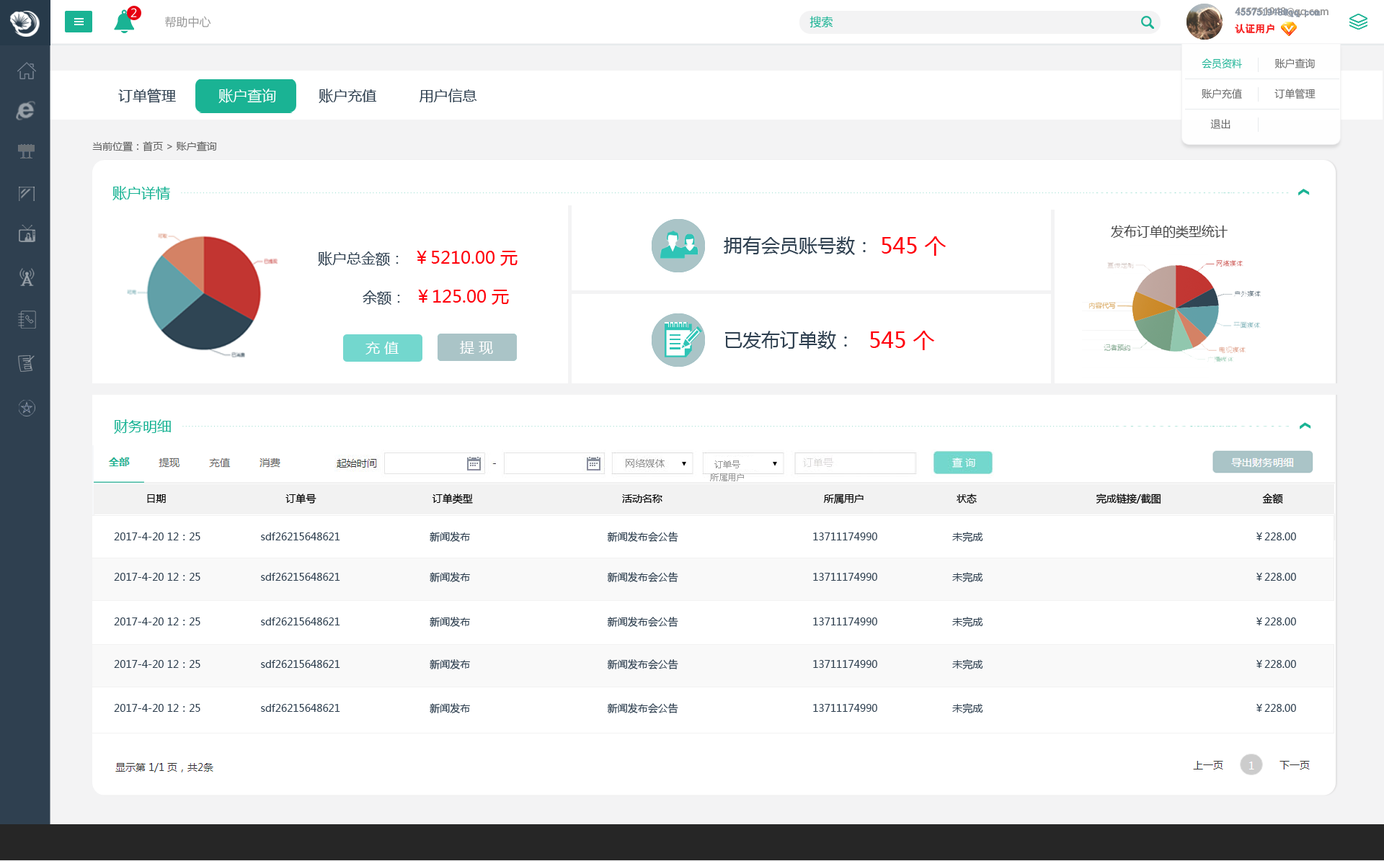
<style>
.page{position:relative;width:1384px;height:861px;background:#ffffff}
.page>*{position:absolute;margin:0}
.t1{font:11.5px "MicrosoftYaHei";color:#ffffff}
.t2{font:11.5px "MicrosoftYaHei";color:#999999}
.t3{font:11.5px "MicrosoftYaHei";color:#1ab394}
.t4{font:10.1px/17.3px "AdobeHeitiStd-Regular";color:#999999}
.t5{font:10.1px/17.3px "AdobeHeitiStd-Regular";color:#f61e1e}
.t6{font:10.1px/17.3px "AdobeHeitiStd-Regular";color:#ffffff}
.t7{font:10.1px/17.3px "SimSun";color:#8894a4;font-weight:bold}
.t8{font:10.1px/17.3px "SimSun";color:#f61e1e}
.t9{font:10.1px/30.3px "MicrosoftYaHei";color:#666666}
.t10{font:10.1px/30.3px "MicrosoftYaHei";color:#1ab394}
.t11{font:14.4px "MicrosoftYaHei";color:#2f4050}
.t12{font:14.4px "MicrosoftYaHei";color:#ffffff}
.t13{font:10.1px "MicrosoftYaHei";color:#666666}
.t14{font:14.4px "MicrosoftYaHei";color:#1ab394}
.t15{font:13px "MicrosoftYaHei";color:#474747}
.t16{font:18.7px "MicrosoftYaHei";color:#2f4050}
.t17{font:21.6px "MicrosoftYaHei";color:#ff000c}
.t18{font:17.3px "MicrosoftYaHei";color:#ff000c}
.t19{font:8.7px/13px "MicrosoftYaHei";color:#999999}
.t20{font:10.1px "MicrosoftYaHei";color:#000000}
.t21{font:10.1px "MicrosoftYaHei";color:#2f4050}
</style>
<div class="page">
<p class="t1" style="left:130px;top:8px;width:7px;height:9px">2</p>
<p class="t2" style="left:165px;top:16px;width:46px;height:12px">帮助中心</p>
<p class="t3" style="left:810px;top:16px;width:23px;height:12px">搜索</p>
<p class="t4" style="left:1235px;top:7px;width:94px;height:27px">455751948@qq.com<br><span class="t5">认证用户               </span><span class="t6">退出</span></p>
<p class="t7" style="left:1235px;top:8px;width:86px;height:26px">455751948@qq.com<br><span class="t8">认证用户</span></p>
<p class="t9" style="left:1202px;top:58px;width:114px;height:71px"><span class="t10">会员资料</span>           账户查询<br>账户充值           订单管理           <br>   退出</p>
<p class="t11" style="left:118px;top:89px;width:359px;height:14px">订单管理         <span class="t12"> 账户查询          </span>账户充值          用户信息</p>
<p class="t13" style="left:92px;top:141px;width:125px;height:10px">当前位置：首页 &gt; 账户查询</p>
<p class="t14" style="left:112px;top:186px;width:58px;height:14px">账户详情</p>
<p class="t15" style="left:1111px;top:225px;width:117px;height:14px">发布订单的类型统计</p>
<p class="t16" style="left:724px;top:236px;width:142px;height:19px">拥有会员账号数：</p>
<p class="t17" style="left:882px;top:236px;width:65px;height:20px">545 个</p>
<p class="t18" style="left:318px;top:251px;width:200px;height:15px"><span class="t11">账户总金额：  </span>￥5210.00 元</p>
<p class="t18" style="left:363px;top:290px;width:146px;height:15px"><span class="t11">余额：  </span>￥125.00 元</p>
<p class="t12" style="left:366px;top:342px;width:33px;height:13px">充 值</p>
<p class="t12" style="left:460px;top:341px;width:33px;height:14px">提 现</p>
<p class="t16" style="left:725px;top:331px;width:122px;height:19px">已发布订单数：</p>
<p class="t17" style="left:870px;top:331px;width:65px;height:19px">545 个</p>
<p class="t14" style="left:114px;top:420px;width:57px;height:14px">财务明细</p>
<p class="t19" style="left:710px;top:461px;width:34px;height:21px;text-align:center">订单号<br>所属用户</p>
<p class="t20" style="left:147px;top:494px;width:1136px;height:11px">日期                                        订单号                                       订单类型                                                  活动名称                                                      所属用户                               状态                                        完成链接/截图                                  金额</p>
<p class="t21" style="left:114px;top:532px;width:1182px;height:10px">2017-4-20 12：25                    sdf26215648621                              新闻发布                                              新闻发布会公告                                             13711174990                         未完成                                                                                           ￥228.00</p>
<p class="t21" style="left:114px;top:572px;width:1182px;height:10px">2017-4-20 12：25                    sdf26215648621                              新闻发布                                              新闻发布会公告                                             13711174990                         未完成                                                                                           ￥228.00</p>
<p class="t21" style="left:114px;top:617px;width:1182px;height:10px">2017-4-20 12：25                    sdf26215648621                              新闻发布                                              新闻发布会公告                                             13711174990                         未完成                                                                                           ￥228.00</p>
<p class="t21" style="left:114px;top:660px;width:1182px;height:10px">2017-4-20 12：25                    sdf26215648621                              新闻发布                                              新闻发布会公告                                             13711174990                         未完成                                                                                           ￥228.00</p>
<p class="t21" style="left:114px;top:704px;width:1182px;height:10px">2017-4-20 12：25                    sdf26215648621                              新闻发布                                              新闻发布会公告                                             13711174990                         未完成                                                                                           ￥228.00</p>
</div>
